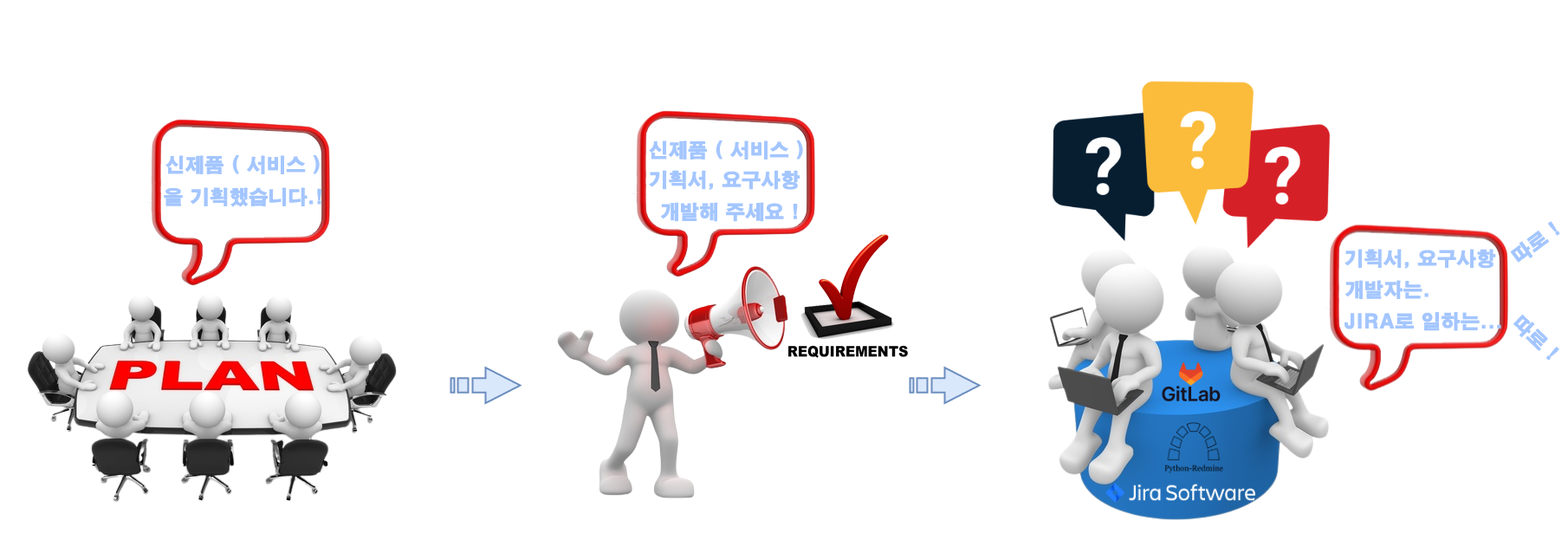
<style>
.page{position:relative;width:1568px;height:547px;background:#ffffff}
.page>*{position:absolute;margin:0}
.t1{font:19.1px "H2gtrE";color:#a4c6ff;font-weight:bold}
</style>
<div class="page">
<p class="t1" style="left:649px;top:140px;width:154px;height:19px">신제품 ( 서비스 )</p>
<p class="t1" style="left:165px;top:155px;width:155px;height:19px">신제품 ( 서비스 )</p>
<p class="t1" style="left:649px;top:170px;width:151px;height:20px">기획서, 요구사항</p>
<p class="t1" style="left:164px;top:187px;width:157px;height:20px">을 기획했습니다.!</p>
<p class="t1" style="left:661px;top:202px;width:137px;height:20px">개발해 주세요 !</p>
<p class="t1" style="left:1510px;top:221px;width:50px;height:41px;rotate:-37deg">따로 !</p>
<p class="t1" style="left:1344px;top:249px;width:152px;height:20px">기획서, 요구사항</p>
<p class="t1" style="left:1345px;top:280px;width:84px;height:19px">개발자는.</p>
<p class="t1" style="left:1344px;top:312px;width:157px;height:19px">JIRA로 일하는...</p>
<p class="t1" style="left:1513px;top:314px;width:46px;height:46px;rotate:44deg">따로 !</p>
</div>
